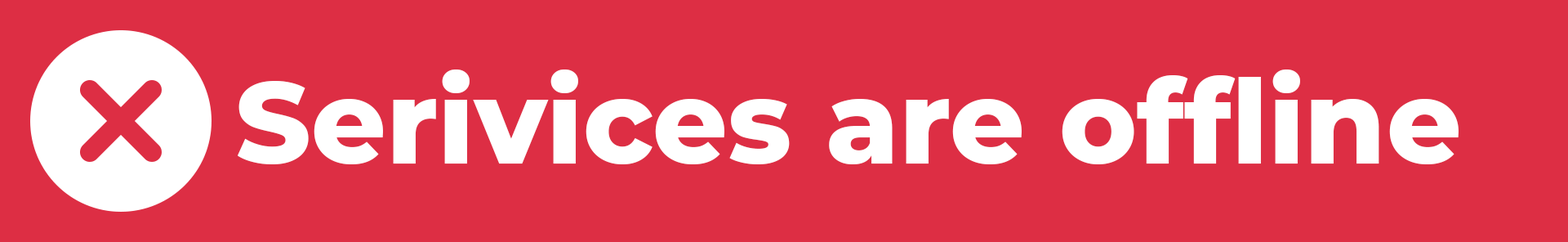
<style>
.page{position:relative;width:1568px;height:242px;background:#dd2e44}
.page>*{position:absolute;margin:0}
.t1{font:116.8px "Montserrat-ExtraBold";color:#ffffff}
</style>
<div class="page">
<p class="t1" style="left:238px;top:69px;width:1078px;height:95px">Serivice is online!</p>
<p class="t1" style="left:238px;top:69px;width:1221px;height:95px">Serivices are offline</p>
</div>
